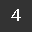
<style>
.page{position:relative;width:32px;height:32px;background:#333333}
.page>*{position:absolute;margin:0}
.t1{font:17.8px "MyriadPro-Regular";color:#ffffff;scale:1.12 1}
</style>
<div class="page">
<p class="t1" style="left:11px;top:9px;width:10px;height:12px">4</p>
</div>
